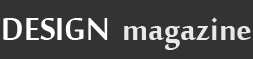
<style>
.page{position:relative;width:253px;height:59px;background:#333333}
.page>*{position:absolute;margin:0}
.t1{font:48px "MoolBoran";color:#e8e8e8}
.t2{font:48px "MoolBoran";color:#ffffff}
</style>
<div class="page">
<p class="t1" style="left:3px;top:17px;width:248px;height:33px"><span class="t2">DESIGN </span> magazine</p>
</div>
